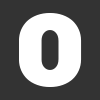
<style>
.page{position:relative;width:100px;height:100px;background:#333333}
.page>*{position:absolute;margin:0}
.t1{font:100.5px "RoundsBlack";color:#ffffff}
</style>
<div class="page">
<p class="t1" style="left:19px;top:13px;width:63px;height:74px">0</p>
</div>
